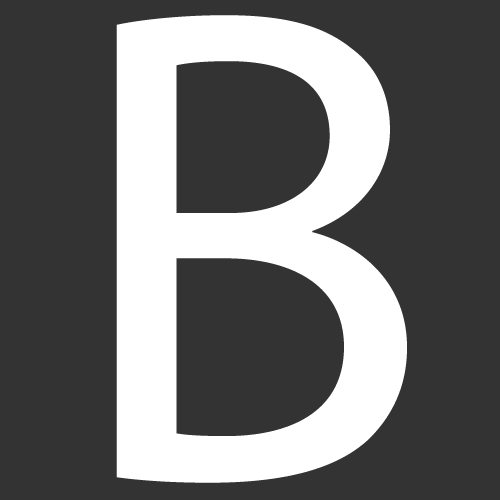
<style>
.page{position:relative;width:500px;height:500px;background:#333333}
.page>*{position:absolute;margin:0}
.t1{font:682.2px "MyriadPro-Regular";color:#ffffff}
</style>
<div class="page">
<p class="t1" style="left:116px;top:15px;width:291px;height:468px">B</p>
</div>
